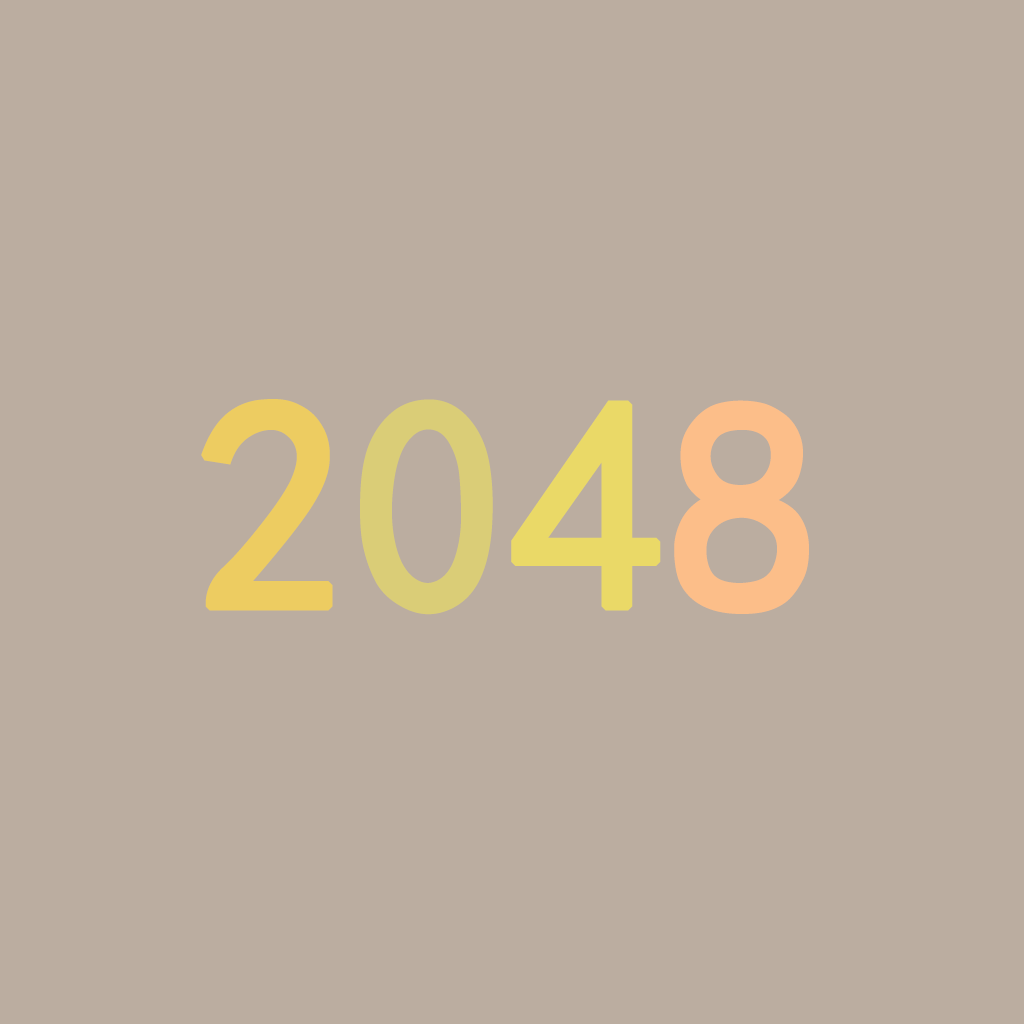
<style>
.page{position:relative;width:1024px;height:1024px;background:#bbada0}
.page>*{position:absolute;margin:0}
.t1{font:300px "KaiTi";color:#edcc61;font-weight:bold}
.t2{font:300px "KaiTi";color:#dacd77;font-weight:bold}
.t3{font:300px "KaiTi";color:#ead967;font-weight:bold}
.t4{font:300px "KaiTi";color:#fcbe89;font-weight:bold}
</style>
<div class="page">
<p class="t1" style="left:201px;top:399px;width:608px;height:216px">2<span class="t2">0</span><span class="t3">4</span><span class="t4">8</span></p>
</div>
